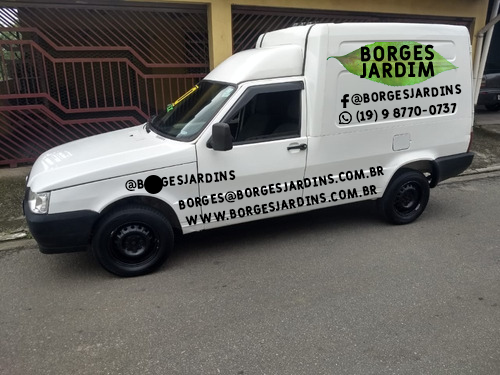
<style>
.page{position:relative;width:500px;height:375px}
.page>*{position:absolute;margin:0}
.t1{font:13.2px "Fulbo-Argenta";color:#000000}
</style>
<div class="page">
<p class="t1" style="left:351px;top:84px;width:111px;height:21px;rotate:-5deg">@borgesjardins</p>
<p class="t1" style="left:356px;top:103px;width:101px;height:20px;rotate:-5deg">(19) 9 8770-0737</p>
<p class="t1" style="left:125px;top:170px;width:111px;height:21px;rotate:-5deg">@borgesjardins</p>
<p class="t1" style="left:178px;top:166px;width:206px;height:44px;rotate:-10deg">borges@borgesjardins.com.br</p>
<p class="t1" style="left:185px;top:185px;width:192px;height:41px;rotate:-10deg">www.borgesjardins.com.br</p>
</div>
